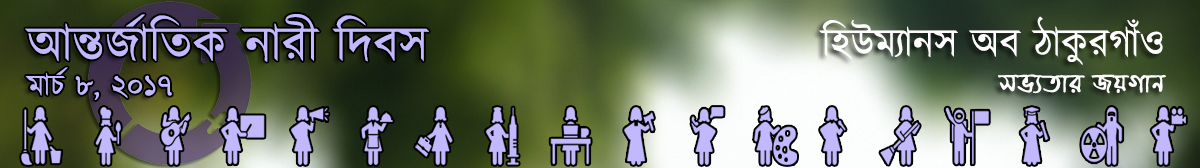
<style>
.page{position:relative;width:1200px;height:168px}
.page>*{position:absolute;margin:0}
.t1{font:50px "Kalpurush";color:#c1b8fd}
.t2{font:40px "Kalpurush";color:#fffefe}
.t3{font:30px "Kalpurush";color:#c1b8fd}
.t4{font:33.3px "EkusheyPuja";color:#fffefe}
</style>
<div class="page">
<p class="t1" style="left:25px;top:14px;width:404px;height:48px">আন্তর্জাতিক নারী দিবস</p>
<p class="t2" style="left:819px;top:16px;width:344px;height:49px">হিউম্যানস অব ঠাকুরগাঁও</p>
<p class="t3" style="left:25px;top:67px;width:147px;height:33px">মার্চ ৮, ২০১৭</p>
<p class="t4" style="left:998px;top:74px;width:168px;height:20px">সভ্যতার জয়গান</p>
</div>
